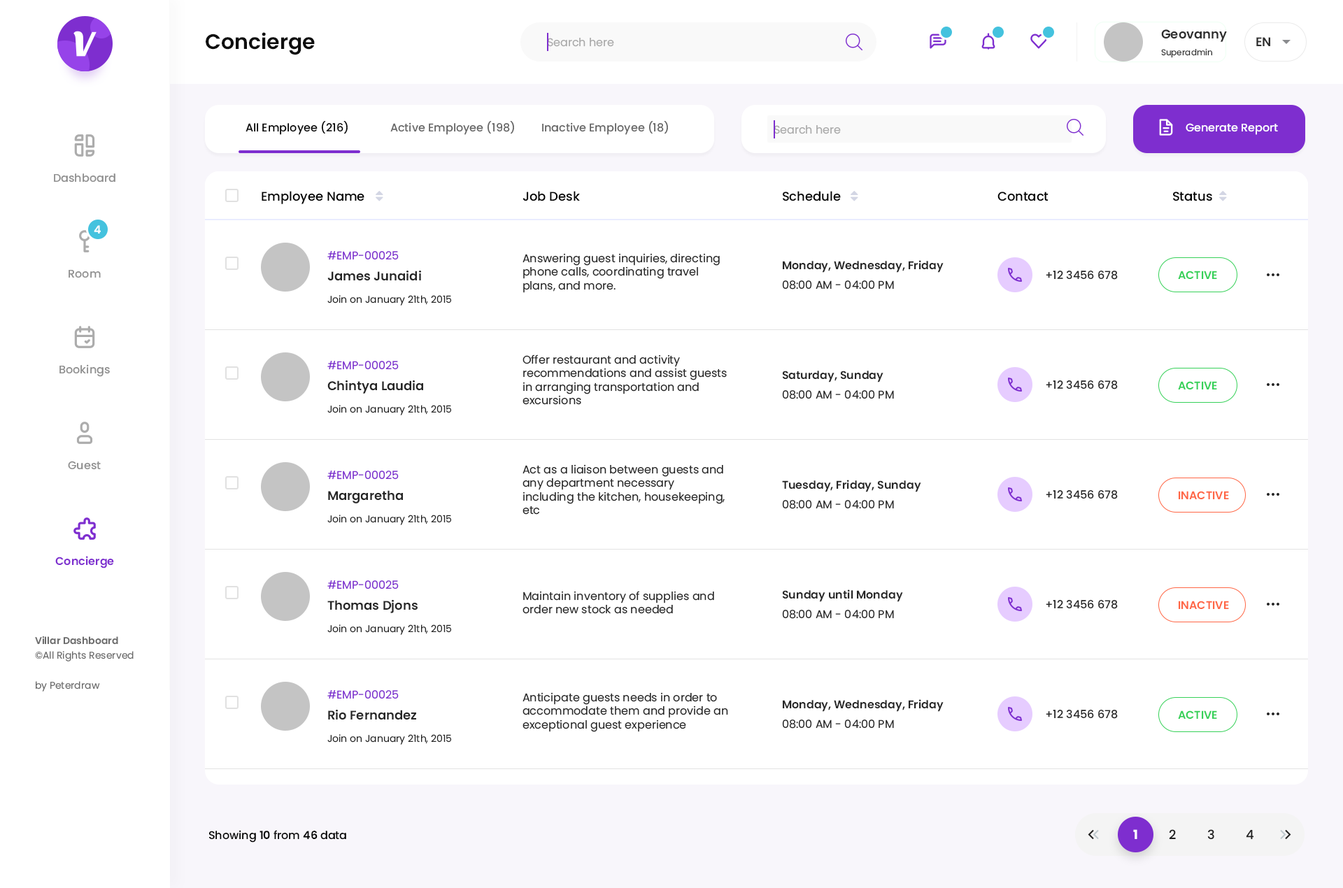
<style>
.page{position:relative;width:1343px;height:888px;background:#ffffff}
.page>*{position:absolute;margin:0}
.t1{font:12.6px "Poppins-SemiBold";color:#2e2e2e}
.t2{font:21px "Poppins-SemiBold";color:#0f0f0f}
.t3{font:11.2px "Poppins-Regular";color:#aaaaaa}
.t4{font:8.4px "Poppins-Regular";color:#2e2e2e}
.t5{font:11.2px "Poppins-Medium";color:#000000}
.t6{font:11.2px "Poppins-Medium";color:#666666}
.t7{font:11.2px "Poppins-Medium";color:#ffffff}
.t8{font:11.2px "Poppins-Medium";color:#8f8f8f}
.t9{font:12.6px "Poppins-Medium";color:#000000}
.t10{font:11.2px "Poppins-SemiBold";color:#ffffff}
.t11{font:11.2px "Poppins-Regular";color:#7e2ecf}
.t12{font:11.2px "Poppins-Regular";color:#262626}
.t13{font:11.2px "Poppins-SemiBold";color:#262626}
.t14{font:12.6px "Poppins-SemiBold";color:#262626}
.t15{font:11.2px "Poppins-Medium";color:#262626}
.t16{font:11.2px "Poppins-SemiBold";color:#37d159}
.t17{font:9.8px "Poppins-Regular";color:#262626}
.t18{font:11.2px "Poppins-SemiBold";color:#ff6746}
.t19{font:11.2px "Poppins-SemiBold";color:#7e2ecf}
.t20{font:9.8px "Poppins-SemiBold";color:#6b6b6b}
.t21{font:9.8px "Poppins-Regular";color:#6b6b6b}
.t22{font:11.2px "Poppins-SemiBold";color:#000000}
.t23{font:12.6px "Poppins-Bold";color:#ffffff}
.t24{font:12.6px "Poppins-Medium";color:#202020}
</style>
<div class="page">
<p class="t1" style="left:1161px;top:29px;width:66px;height:13px">Geovanny</p>
<p class="t2" style="left:206px;top:32px;width:109px;height:23px">Concierge</p>
<p class="t3" style="left:547px;top:38px;width:67px;height:9px">Search here</p>
<p class="t1" style="left:1256px;top:37px;width:14px;height:9px">EN</p>
<p class="t4" style="left:1161px;top:48px;width:51px;height:10px">Superadmin</p>
<p class="t5" style="left:245px;top:121px;width:103px;height:14px">All Employee (216)</p>
<p class="t6" style="left:390px;top:121px;width:124px;height:14px">Active Employee (198)</p>
<p class="t6" style="left:542px;top:121px;width:126px;height:14px">Inactive Employee (18)</p>
<p class="t3" style="left:773px;top:125px;width:68px;height:9px">Search here</p>
<p class="t7" style="left:1185px;top:123px;width:93px;height:12px">Generate Report</p>
<p class="t8" style="left:54px;top:173px;width:61px;height:10px">Dashboard</p>
<p class="t9" style="left:262px;top:191px;width:102px;height:13px">Employee Name</p>
<p class="t9" style="left:522px;top:191px;width:58px;height:10px">Job Desk</p>
<p class="t9" style="left:783px;top:191px;width:58px;height:10px">Schedule</p>
<p class="t9" style="left:997px;top:192px;width:51px;height:9px">Contact</p>
<p class="t9" style="left:1173px;top:192px;width:39px;height:9px">Status</p>
<p class="t10" style="left:94px;top:225px;width:7px;height:9px">4</p>
<p class="t11" style="left:327px;top:251px;width:72px;height:9px">#EMP-00025</p>
<p class="t12" style="left:522px;top:253px;width:198px;height:40px">Answering guest inquiries, directing phone calls, coordinating travel plans, and more.</p>
<p class="t8" style="left:69px;top:270px;width:32px;height:8px">Room</p>
<p class="t13" style="left:783px;top:260px;width:160px;height:13px">Monday, Wednesday, Friday</p>
<p class="t14" style="left:327px;top:271px;width:94px;height:10px">James Junaidi</p>
<p class="t12" style="left:782px;top:280px;width:112px;height:10px">08:00 AM - 04:00 PM</p>
<p class="t15" style="left:1045px;top:271px;width:72px;height:9px">+12 3456 678</p>
<p class="t16" style="left:1178px;top:271px;width:39px;height:8px">ACTIVE</p>
<p class="t17" style="left:327px;top:295px;width:125px;height:11px">Join on January 21th, 2015</p>
<p class="t8" style="left:59px;top:364px;width:51px;height:13px">Bookings</p>
<p class="t11" style="left:327px;top:361px;width:72px;height:9px">#EMP-00025</p>
<p class="t12" style="left:522px;top:355px;width:205px;height:50px">Offer restaurant and activity recommendations and assist guests in arranging transportation and excursions</p>
<p class="t13" style="left:782px;top:371px;width:101px;height:12px">Saturday, Sunday</p>
<p class="t14" style="left:327px;top:380px;width:96px;height:14px">Chintya Laudia</p>
<p class="t15" style="left:1045px;top:380px;width:72px;height:10px">+12 3456 678</p>
<p class="t16" style="left:1178px;top:381px;width:39px;height:9px">ACTIVE</p>
<p class="t12" style="left:782px;top:390px;width:112px;height:9px">08:00 AM - 04:00 PM</p>
<p class="t17" style="left:327px;top:405px;width:125px;height:10px">Join on January 21th, 2015</p>
<p class="t8" style="left:68px;top:461px;width:33px;height:9px">Guest</p>
<p class="t11" style="left:327px;top:471px;width:72px;height:9px">#EMP-00025</p>
<p class="t12" style="left:522px;top:464px;width:202px;height:51px">Act as a liaison between guests and any department necessary including the kitchen, housekeeping, etc</p>
<p class="t13" style="left:782px;top:480px;width:139px;height:12px">Tuesday, Friday, Sunday</p>
<p class="t14" style="left:328px;top:490px;width:75px;height:13px">Margaretha</p>
<p class="t15" style="left:1045px;top:490px;width:72px;height:9px">+12 3456 678</p>
<p class="t18" style="left:1178px;top:491px;width:51px;height:8px">INACTIVE</p>
<p class="t12" style="left:782px;top:500px;width:112px;height:9px">08:00 AM - 04:00 PM</p>
<p class="t17" style="left:327px;top:515px;width:125px;height:10px">Join on January 21th, 2015</p>
<p class="t19" style="left:55px;top:556px;width:59px;height:13px">Concierge</p>
<p class="t11" style="left:327px;top:580px;width:72px;height:10px">#EMP-00025</p>
<p class="t12" style="left:522px;top:591px;width:192px;height:23px">Maintain inventory of supplies and order new stock as needed</p>
<p class="t13" style="left:782px;top:590px;width:121px;height:12px">Sunday until Monday</p>
<p class="t14" style="left:327px;top:600px;width:90px;height:13px">Thomas Djons</p>
<p class="t15" style="left:1045px;top:600px;width:72px;height:9px">+12 3456 678</p>
<p class="t18" style="left:1178px;top:601px;width:51px;height:8px">INACTIVE</p>
<p class="t12" style="left:782px;top:610px;width:112px;height:9px">08:00 AM - 04:00 PM</p>
<p class="t17" style="left:327px;top:624px;width:125px;height:11px">Join on January 21th, 2015</p>
<p class="t20" style="left:35px;top:636px;width:83px;height:9px">Villar Dashboard</p>
<p class="t21" style="left:35px;top:651px;width:99px;height:11px">©All Rights Reserved</p>
<p class="t21" style="left:36px;top:681px;width:64px;height:11px">by Peterdraw</p>
<p class="t11" style="left:327px;top:690px;width:72px;height:9px">#EMP-00025</p>
<p class="t12" style="left:522px;top:692px;width:206px;height:40px">Anticipate guests needs in order to accommodate them and provide an exceptional guest experience</p>
<p class="t13" style="left:783px;top:699px;width:160px;height:13px">Monday, Wednesday, Friday</p>
<p class="t14" style="left:328px;top:710px;width:88px;height:10px">Rio Fernandez</p>
<p class="t15" style="left:1045px;top:710px;width:72px;height:9px">+12 3456 678</p>
<p class="t16" style="left:1178px;top:710px;width:39px;height:9px">ACTIVE</p>
<p class="t12" style="left:782px;top:720px;width:112px;height:9px">08:00 AM - 04:00 PM</p>
<p class="t17" style="left:327px;top:734px;width:125px;height:11px">Join on January 21th, 2015</p>
<p class="t5" style="left:209px;top:830px;width:137px;height:13px">Showing <span class="t22">10 </span>from <span class="t22">46 </span>data</p>
<p class="t23" style="left:1133px;top:829px;width:4px;height:10px">1</p>
<p class="t24" style="left:1169px;top:829px;width:7px;height:10px">2</p>
<p class="t24" style="left:1207px;top:829px;width:7px;height:11px">3</p>
<p class="t24" style="left:1245px;top:829px;width:9px;height:11px">4</p>
</div>
